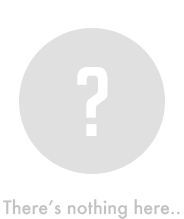
<style>
.page{position:relative;width:184px;height:219px;background:#ffffff}
.page>*{position:absolute;margin:0}
.t1{font:96px "BigNoodleTitling";color:#ffffff}
.t2{font:18px "Futura-Medium";color:#c2c2c2}
</style>
<div class="page">
<p class="t1" style="left:77px;top:67px;width:31px;height:69px">?</p>
<p class="t2" style="left:3px;top:199px;width:177px;height:20px">There’s nothing here..</p>
</div>
